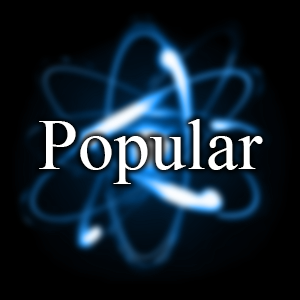
<style>
.page{position:relative;width:300px;height:300px;background:#000000}
.page>*{position:absolute;margin:0}
.t1{font:72.1px "TimesNewRomanPSMT";color:#ffffff}
</style>
<div class="page">
<p class="t1" style="left:39px;top:119px;width:224px;height:65px">Popular</p>
</div>
